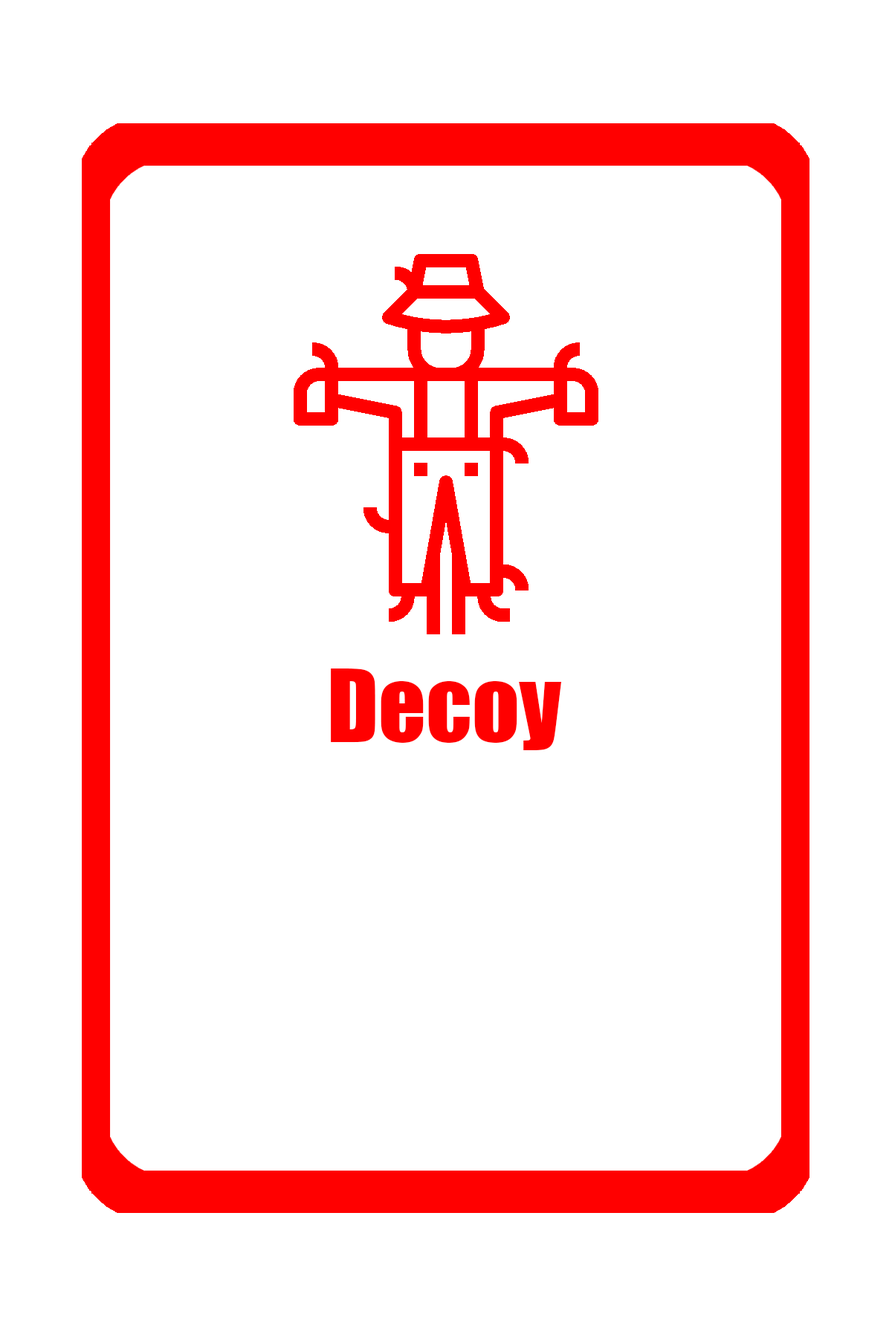
<style>
.page{position:relative;width:892px;height:1337px;background:#ffffff}
.page>*{position:absolute;margin:0}
.t1{font:92.9px "Impact";color:#ff0000}
</style>
<div class="page">
<p class="t1" style="left:331px;top:669px;width:231px;height:81px">Decoy</p>
</div>
